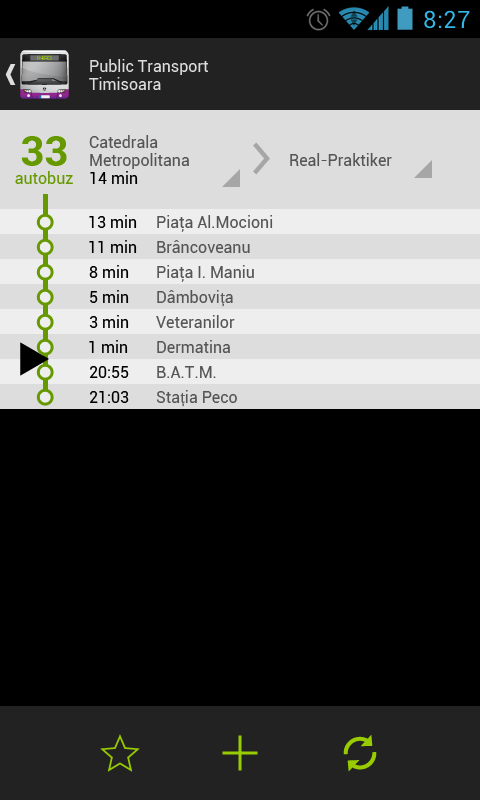
<style>
.page{position:relative;width:480px;height:800px;background:#000000}
.page>*{position:absolute;margin:0}
.t1{font:16px/18px "Roboto-Regular";color:#dddddd}
.t2{font:42px "Roboto-Bold";color:#669900}
.t3{font:16px/18px "Roboto-Regular";color:#555555}
.t4{font:16px/18px "Roboto-Regular";color:#000000}
.t5{font:16px "Roboto-Regular";color:#555555}
.t6{font:16px "Roboto-Regular";color:#669900}
.t7{font:16px "Roboto-Regular";color:#000000}
.t8{font:16px "MinionPro-Regular";color:#555555}
</style>
<div class="page">
<p class="t1" style="left:89px;top:59px;width:119px;height:31px">Public Transport<br>Timisoara</p>
<p class="t2" style="left:21px;top:136px;width:46px;height:30px">33</p>
<p class="t3" style="left:89px;top:135px;width:100px;height:49px">Catedrala<br>Metropolitana<br><span class="t4">14 min</span></p>
<p class="t5" style="left:290px;top:153px;width:102px;height:13px">Real-Praktiker</p>
<p class="t6" style="left:15px;top:171px;width:58px;height:13px">autobuz</p>
<p class="t7" style="left:89px;top:215px;width:48px;height:13px">13 min</p>
<p class="t5" style="left:157px;top:215px;width:116px;height:17px">Piaţa Al.Mocioni</p>
<p class="t7" style="left:89px;top:240px;width:48px;height:13px">11 min</p>
<p class="t5" style="left:157px;top:240px;width:93px;height:13px">Brâncoveanu</p>
<p class="t7" style="left:89px;top:265px;width:40px;height:13px">8 min</p>
<p class="t5" style="left:157px;top:265px;width:97px;height:17px">Piaţa I. Maniu</p>
<p class="t7" style="left:90px;top:290px;width:39px;height:13px">5 min</p>
<p class="t5" style="left:157px;top:290px;width:76px;height:17px">Dâmbovi<span class="t8">ț</span>a</p>
<p class="t7" style="left:89px;top:315px;width:40px;height:13px">3 min</p>
<p class="t5" style="left:156px;top:315px;width:79px;height:13px">Veteranilor</p>
<p class="t7" style="left:89px;top:340px;width:39px;height:13px">1 min</p>
<p class="t5" style="left:157px;top:340px;width:73px;height:13px">Dermatina</p>
<p class="t7" style="left:90px;top:366px;width:39px;height:12px">20:55</p>
<p class="t5" style="left:157px;top:366px;width:59px;height:12px">B.A.T.M.</p>
<p class="t5" style="left:156px;top:390px;width:81px;height:17px">Sta<span class="t8">ț</span>ia Peco</p>
<p class="t7" style="left:90px;top:391px;width:39px;height:12px">21:03</p>
</div>
